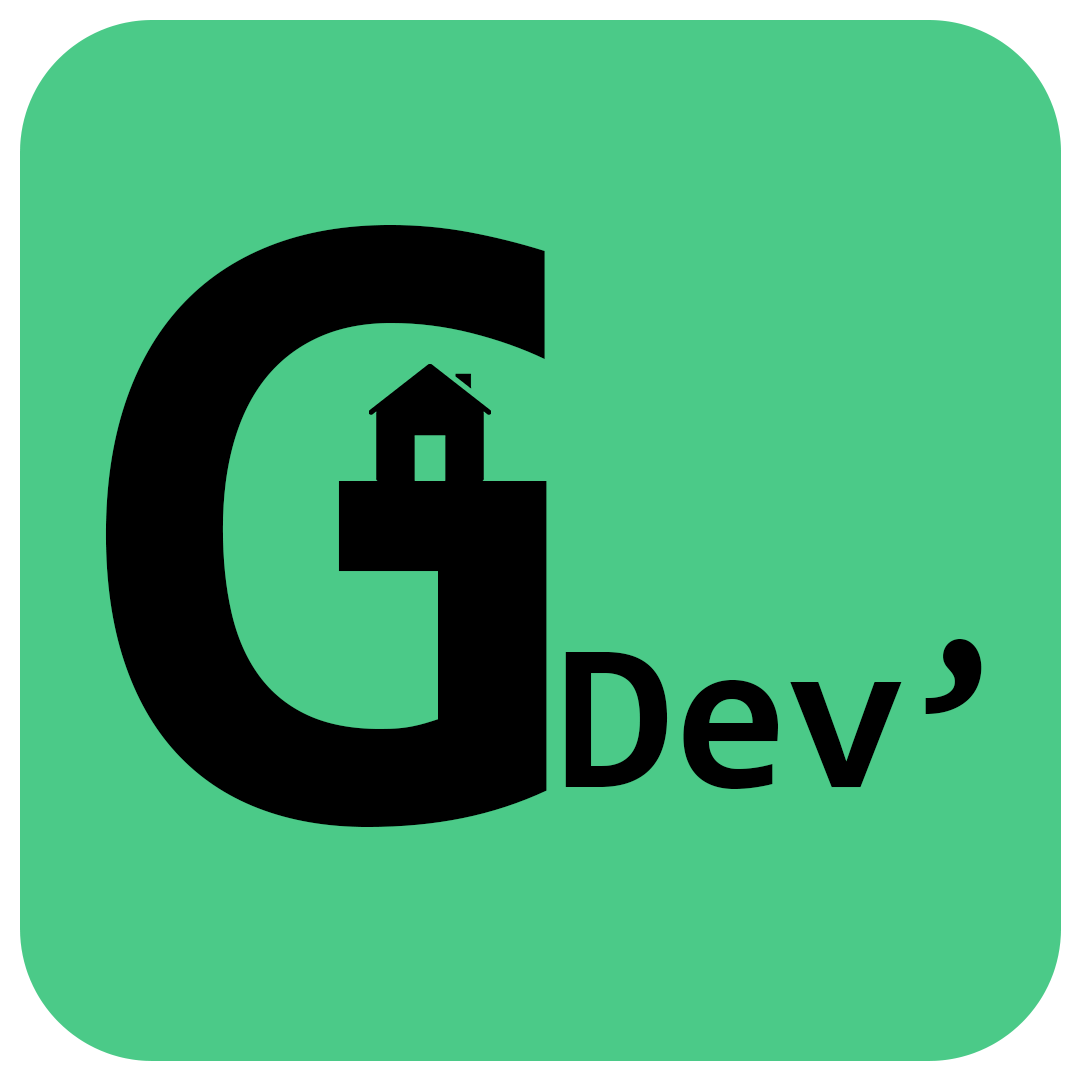
<style>
.page{position:relative;width:1080px;height:1080px;background:#4bca88}
.page>*{position:absolute;margin:0}
.t1{font:912.4px "Consolas-Bold";color:#000000}
.t2{font:210.7px "Consolas-Bold";color:#000000}
</style>
<div class="page">
<p class="t1" style="left:105px;top:225px;width:442px;height:602px">G</p>
<p class="t2" style="left:565px;top:639px;width:417px;height:150px">Dev’</p>
</div>
